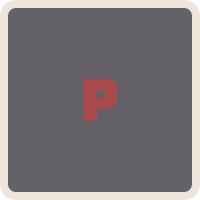
<style>
.page{position:relative;width:200px;height:200px;background:#636167}
.page>*{position:absolute;margin:0}
.t1{font:58.3px "Bungee-Regular";color:#a94949}
</style>
<div class="page">
<p class="t1" style="left:84px;top:79px;width:34px;height:42px">P</p>
</div>
